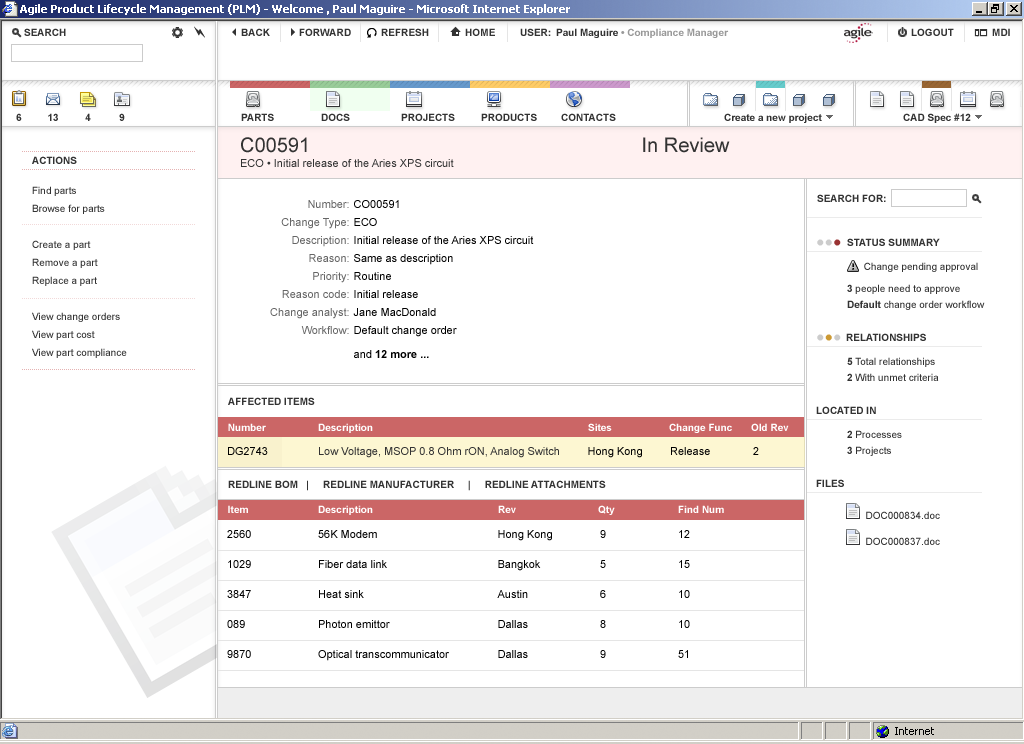
<style>
.page{position:relative;width:1024px;height:744px;background:#ffffff}
.page>*{position:absolute;margin:0}
.t1{font:20px "ArialMT";color:#333333}
.t2{font:10px "Arial-BoldMT";color:#333333}
.t3{font:11px "ArialMT";color:#333333}
.t4{font:10px/18px "ArialMT";color:#333333}
.t5{font:11px/18px "ArialMT";color:#666666}
.t6{font:11px/18px "ArialMT";color:#000000}
.t7{font:11px/18px "Arial-BoldMT";color:#000000}
.t8{font:24px "ArialMT";color:#cccccc}
.t9{font:24px "ArialMT";color:#993333}
.t10{font:10px/16px "ArialMT";color:#333333}
.t11{font:10px/16px "Arial-BoldMT";color:#333333}
.t12{font:24px "ArialMT";color:#cc9933}
.t13{font:10px "Arial-BoldMT";color:#ffffff}
.t14{font:11px "ArialMT";color:#000000}
.t15{font:10px/15px "ArialMT";color:#333333}
.t16{font:11px/30px "ArialMT";color:#000000}
</style>
<div class="page">
<p class="t1" style="left:241px;top:137px;width:489px;height:16px">C00591           In Review</p>
<p class="t2" style="left:32px;top:156px;width:45px;height:8px">ACTIONS</p>
<p class="t3" style="left:241px;top:159px;width:213px;height:8px">ECO • Initial release of the Aries XPS circuit</p>
<p class="t4" style="left:32px;top:186px;width:95px;height:172px">Find parts<br>Browse for parts<br><br>Create a part<br>Remove a part<br>Replace a part<br><br>View change orders<br>View part cost<br>View part compliance</p>
<p class="t2" style="left:817px;top:194px;width:69px;height:8px">SEARCH FOR:</p>
<p class="t5" style="left:270px;top:200px;width:79px;height:134px;text-align:right">Number:<br>Change Type:<br>Description:<br>Reason:<br>Priority:<br>Reason code:<br>Change analyst:<br>Workflow:</p>
<p class="t6" style="left:353px;top:200px;width:181px;height:158px">CO00591<br>ECO<br>Initial release of the Aries XPS circuit<br>Same as description<br>Routine<br>Initial release<br>Jane MacDonald<br>Default change order<br>and <span class="t7">12 more ...</span></p>
<p class="t8" style="left:817px;top:239px;width:24px;height:7px">••<span class="t9">•</span></p>
<p class="t2" style="left:847px;top:238px;width:93px;height:8px">STATUS SUMMARY</p>
<p class="t10" style="left:847px;top:262px;width:138px;height:48px">Change pending approval<br><span class="t11">3</span> people need to approve<br><span class="t11">Default </span>change order workflow</p>
<p class="t8" style="left:817px;top:334px;width:24px;height:7px">•<span class="t12">•</span>•</p>
<p class="t2" style="left:846px;top:333px;width:80px;height:8px">RELATIONSHIPS</p>
<p class="t10" style="left:847px;top:357px;width:92px;height:24px"><span class="t11">5</span> Total relationships<br><span class="t11">2</span> With unmet criteria</p>
<p class="t2" style="left:228px;top:397px;width:87px;height:8px">AFFECTED ITEMS</p>
<p class="t2" style="left:816px;top:406px;width:60px;height:8px">LOCATED IN</p>
<p class="t13" style="left:228px;top:423px;width:38px;height:8px">Number</p>
<p class="t13" style="left:318px;top:423px;width:55px;height:10px">Description</p>
<p class="t13" style="left:588px;top:423px;width:24px;height:8px">Sites</p>
<p class="t13" style="left:669px;top:423px;width:63px;height:10px">Change Func</p>
<p class="t13" style="left:751px;top:423px;width:38px;height:8px">Old Rev</p>
<p class="t10" style="left:847px;top:430px;width:55px;height:26px"><span class="t11">2</span> Processes<br><span class="t11">3</span> Projects</p>
<p class="t14" style="left:228px;top:447px;width:40px;height:8px">DG2743</p>
<p class="t3" style="left:319px;top:447px;width:240px;height:11px">Low Voltage, MSOP 0.8 Ohm rON, Analog Switch</p>
<p class="t14" style="left:588px;top:447px;width:54px;height:11px">Hong Kong</p>
<p class="t14" style="left:671px;top:447px;width:39px;height:8px">Release</p>
<p class="t14" style="left:753px;top:447px;width:6px;height:8px">2</p>
<p class="t2" style="left:228px;top:480px;width:378px;height:11px">REDLINE BOM   |     REDLINE MANUFACTURER     |     REDLINE ATTACHMENTS</p>
<p class="t2" style="left:816px;top:479px;width:28px;height:8px">FILES</p>
<p class="t13" style="left:228px;top:505px;width:20px;height:8px">Item</p>
<p class="t13" style="left:318px;top:505px;width:55px;height:10px">Description</p>
<p class="t13" style="left:498px;top:505px;width:18px;height:8px">Rev</p>
<p class="t13" style="left:598px;top:505px;width:17px;height:10px">Qty</p>
<p class="t13" style="left:678px;top:505px;width:46px;height:8px">Find Num</p>
<p class="t15" style="left:866px;top:511px;width:74px;height:34px">DOC000834.doc<br>       DOC000837.doc</p>
<p class="t16" style="left:227px;top:530px;width:24px;height:128px">2560<br>1029<br>3847<br>089<br>9870</p>
<p class="t16" style="left:318px;top:530px;width:131px;height:131px">56K Modem<br>Fiber data link<br>Heat sink<br>Photon emittor<br>Optical transcommunicator</p>
<p class="t16" style="left:497px;top:530px;width:55px;height:128px">Hong Kong<br>Bangkok<br>Austin<br>Dallas<br>Dallas</p>
<p class="t16" style="left:600px;top:530px;width:6px;height:128px">9<br>5<br>6<br>8<br>9</p>
<p class="t16" style="left:678px;top:530px;width:12px;height:128px">12<br>15<br>10<br>10<br>51</p>
</div>
